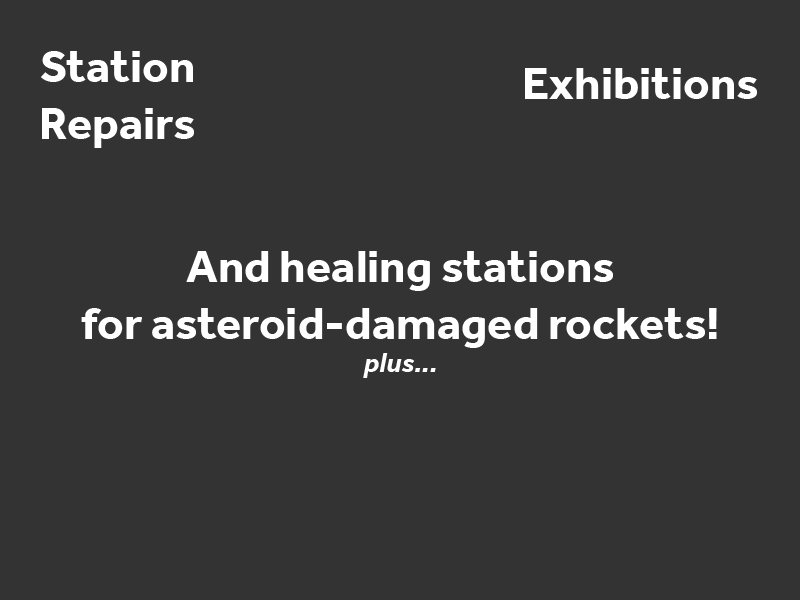
<style>
.page{position:relative;width:800px;height:600px;background:#333333}
.page>*{position:absolute;margin:0}
.t1{font:47.1px "Effra-Bold";color:#ffffff}
.t2{font:28.1px "Effra-BoldItalic";color:#ffffff}
</style>
<div class="page">
<p class="t1" style="left:41px;top:51px;width:153px;height:97px;text-align:center">Station<br>Repairs</p>
<p class="t1" style="left:525px;top:68px;width:232px;height:31px">Exhibitions</p>
<p class="t1" style="left:81px;top:251px;width:636px;height:97px;text-align:center">And healing stations<br>for asteroid-damaged rockets!</p>
<p class="t2" style="left:363px;top:353px;width:73px;height:25px">plus...</p>
</div>
